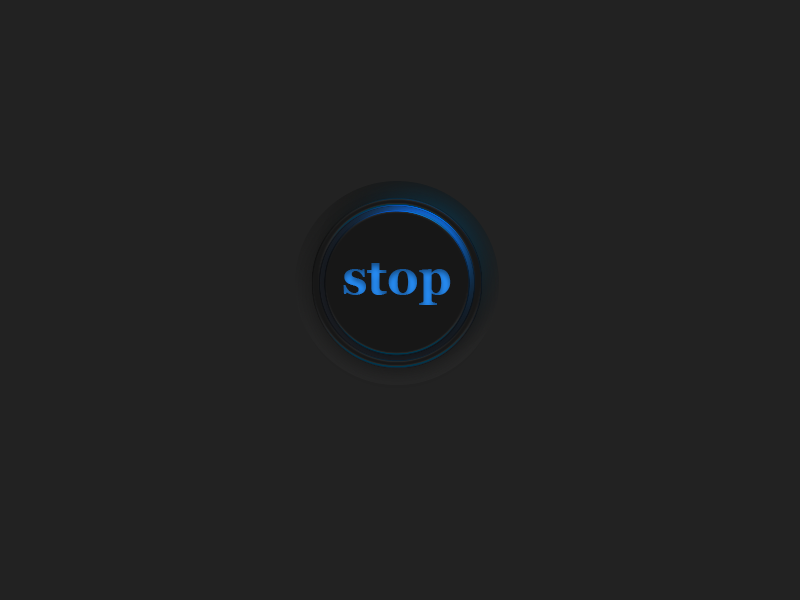
<style>
.page{position:relative;width:800px;height:600px;background:#222222}
.page>*{position:absolute;margin:0}
.t1{font:50px "Georgia-Bold"}
</style>
<div class="page">
<p class="t1" style="left:343px;top:263px;width:108px;height:42px">stop</p>
</div>
